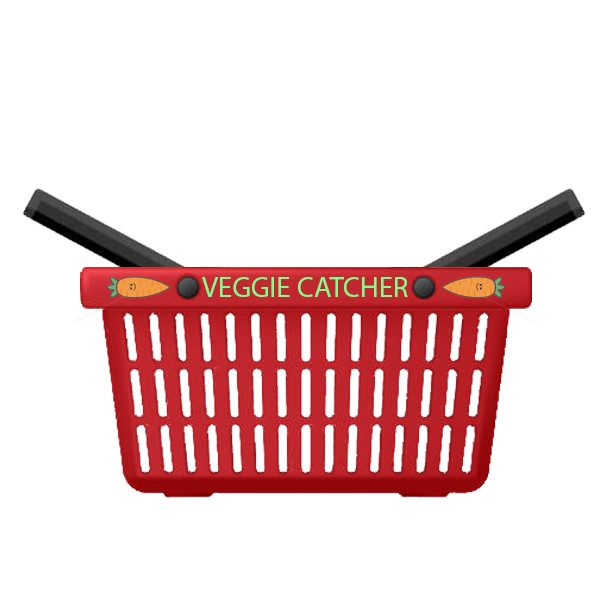
<style>
.page{position:relative;width:612px;height:612px;background:#ffffff}
.page>*{position:absolute;margin:0}
.t1{font:29px "MyriadPro-Regular";color:#7dff8e}
</style>
<div class="page">
<p class="t1" style="left:202px;top:277px;width:206px;height:20px">VEGGIE CATCHER</p>
</div>
